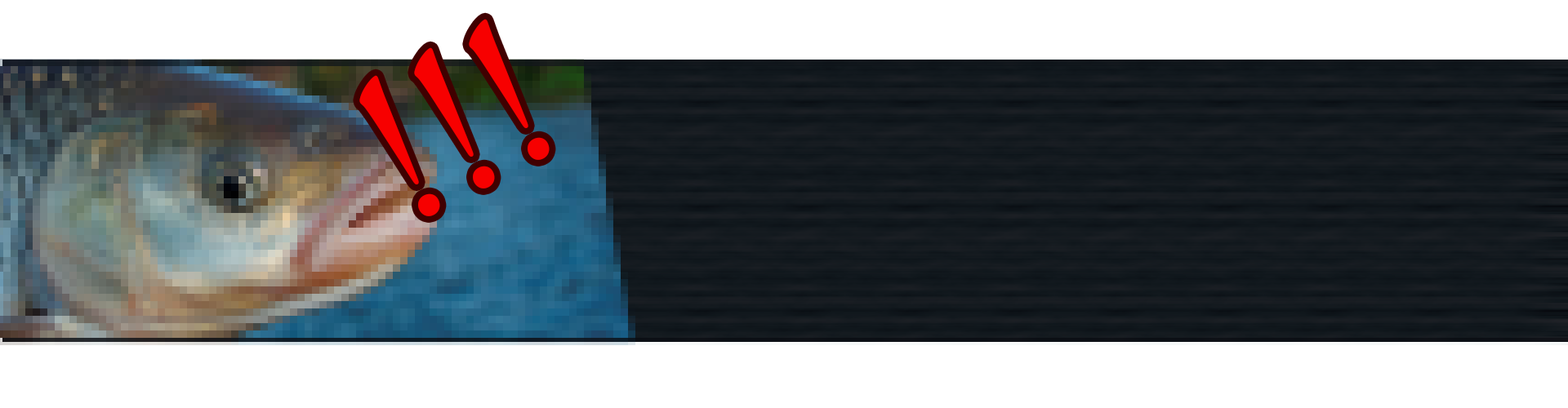
<style>
.page{position:relative;width:1568px;height:408px;background:#ffffff}
.page>*{position:absolute;margin:0}
.t1{font:191.9px "TrajanPro-Bold";color:#f70000}
</style>
<div class="page">
<p class="t1" style="left:359px;top:19px;width:191px;height:197px;rotate:-27deg">!!!</p>
</div>
